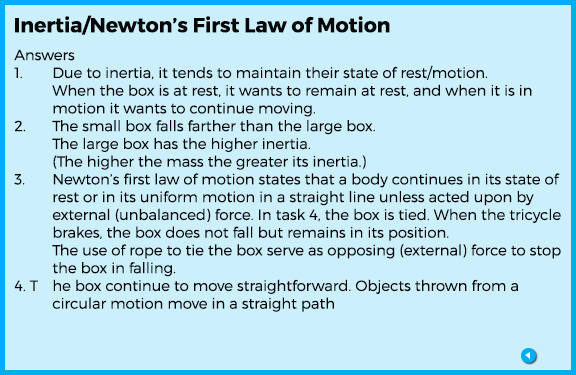
<style>
.page{position:relative;width:576px;height:375px;background:#cceffc}
.page>*{position:absolute;margin:0}
.t1{font:20.4px "Montserrat-Bold";color:#070707}
.t2{font:14.8px "Montserrat-Light";color:#070707}
</style>
<div class="page">
<p class="t1" style="left:15px;top:15px;width:375px;height:20px">Inertia/Newton’s First Law of Motion</p>
<p class="t2" style="left:14px;top:49px;width:547px;height:263px">Answers<br>1.  Due to inertia, it tends to maintain their state of rest/motion.<br> When the box is at rest, it wants to remain at rest, and when it is in<br> motion it wants to continue moving.<br>2.  The small box falls farther than the large box.<br> The large box has the higher inertia.<br> (The higher the mass the greater its inertia.)<br>3.  Newton’s first law of motion states that a body continues in its state of <br> rest or in its uniform motion in a straight line unless acted upon by<br> external (unbalanced) force. In task 4, the box is tied. When the tricycle<br> brakes, the box does not fall but remains in its position. <br> The use of rope to tie the box serve as opposing (external) force to stop<br> the box in falling.<br>4. T he box continue to move straightforward. Objects thrown from a<br> circular motion move in a straight path</p>
</div>
